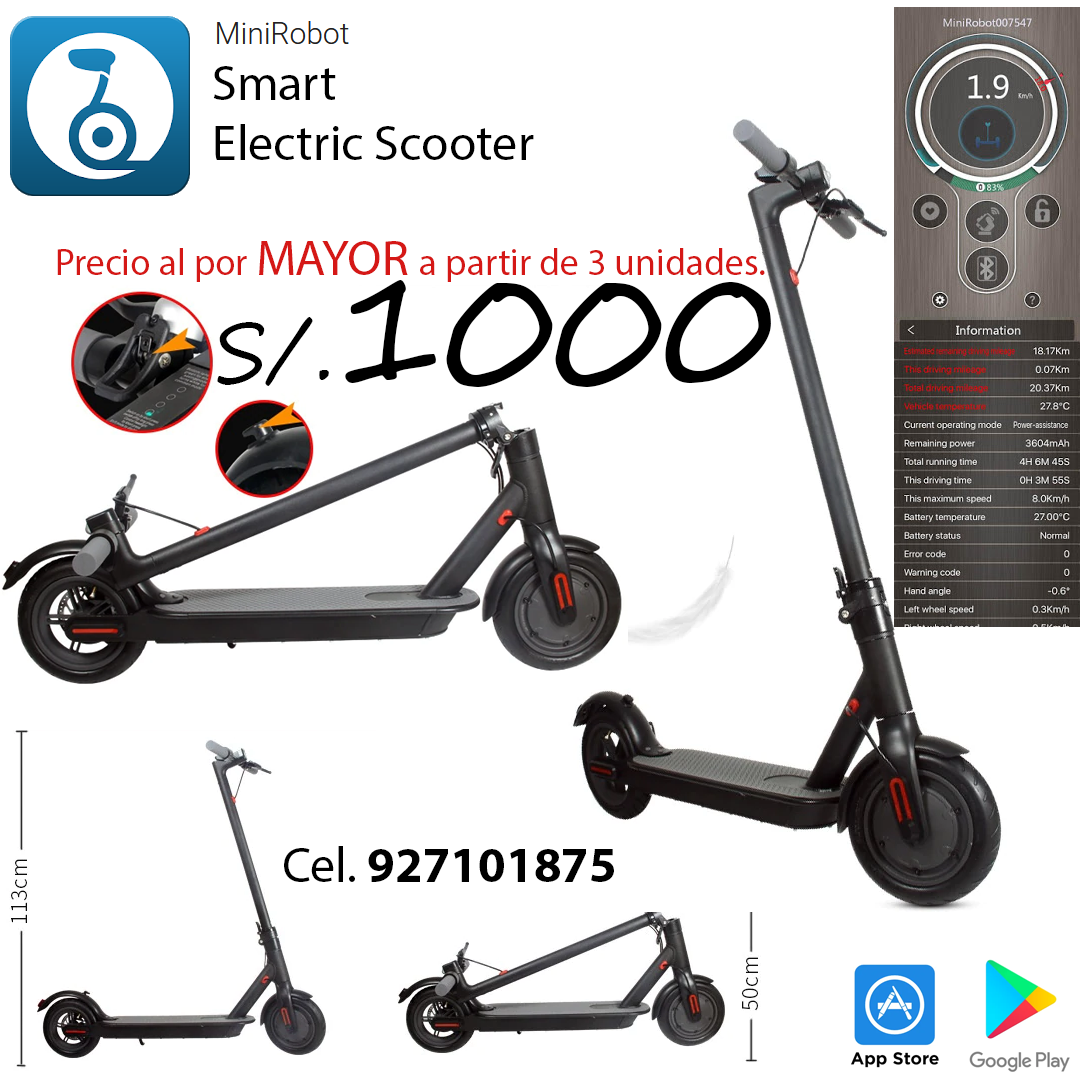
<style>
.page{position:relative;width:1080px;height:1080px;background:#ffffff}
.page>*{position:absolute;margin:0}
.t1{font:50px "MyriadPro-Regular";color:#000000}
.t2{font:37.5px "MyriadPro-Regular";color:#d51816}
.t3{font:50px "MyriadPro-Regular";color:#d51816}
.t4{font:150px "SegoeScript";color:#000000}
.t5{font:83.3px "SegoeScript";color:#000000}
.t6{font:50px "MyriadPro-Bold";color:#000000}
</style>
<div class="page">
<p class="t1" style="left:213px;top:66px;width:321px;height:94px">Smart <br>Electric Scooter</p>
<p class="t2" style="left:57px;top:241px;width:708px;height:41px">Precio al por <span class="t3">MAYOR </span>a partir de 3 unidades.</p>
<p class="t4" style="left:217px;top:280px;width:554px;height:107px"><span class="t5">S/.</span>1000</p>
<p class="t6" style="left:284px;top:846px;width:330px;height:36px"><span class="t1">Cel. </span>927101875</p>
</div>
